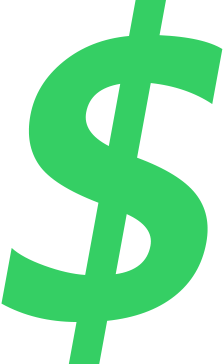
<style>
.page{position:relative;width:224px;height:364px;background:#ffffff}
.page>*{position:absolute;margin:0}
.t1{font:408.4px "NirmalaUI-Bold";color:#35cf64;font-style:italic;scale:1.04 1}
</style>
<div class="page">
<p class="t1" style="left:1px;top:0px;width:222px;height:364px">$</p>
</div>
